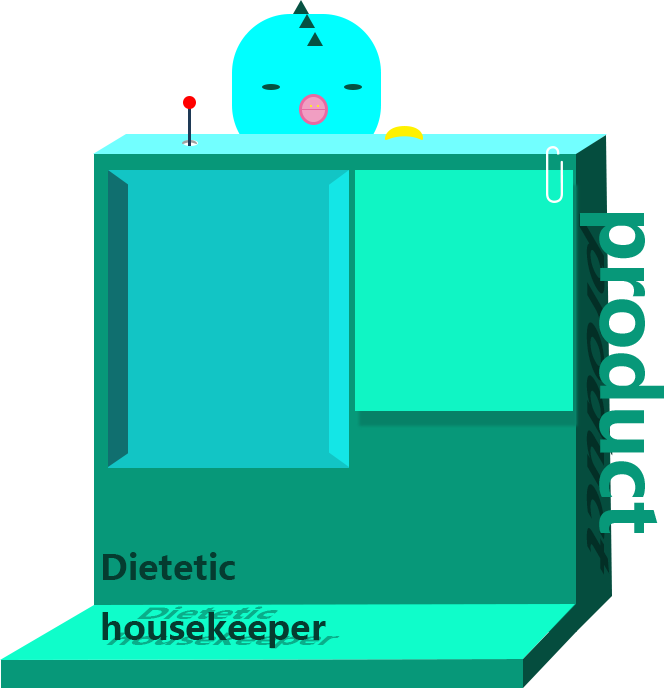
<style>
.page{position:relative;width:664px;height:690px;background:#ffffff}
.page>*{position:absolute;margin:0}
.t1{font:62.1px "MicrosoftYaHei-Bold";color:#032f26;scale:1.32 1}
.t2{font:81.1px "MicrosoftYaHei-Bold";color:#079879}
.t3{font:34.5px "MicrosoftYaHei-Bold";color:#053c30}
</style>
<div class="page">
<p class="t1" style="left:579px;top:214px;width:34px;height:361px;rotate:90deg">product</p>
<p class="t2" style="left:580px;top:213px;width:85px;height:320px;rotate:90deg">product</p>
<p class="t3" style="left:102px;top:552px;width:224px;height:96px">Dietetic <br>housekeeper</p>
</div>
